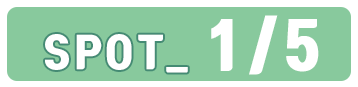
<style>
.page{position:relative;width:358px;height:87px;background:#88c99d}
.page>*{position:absolute;margin:0}
.t1{font:60px "TmonMonsoriBlack";letter-spacing:0.1em;color:#ffffff}
.t2{font:40px "TmonMonsoriBlack";letter-spacing:0.1em;color:#ffffff}
</style>
<div class="page">
<p class="t1" style="left:211px;top:15px;width:108px;height:60px">1/5</p>
<p class="t2" style="left:45px;top:34px;width:143px;height:39px">SPOT_</p>
</div>
